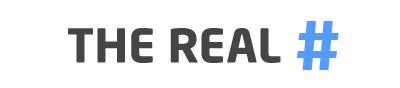
<style>
.page{position:relative;width:400px;height:88px;background:#ffffff}
.page>*{position:absolute;margin:0}
.t1{font:46px "NeoSans-Bold";color:#454545;text-transform:uppercase}
.t2{font:65.9px "NeoSans-Bold";color:#539bff;text-transform:uppercase}
</style>
<div class="page">
<p class="t1" style="left:68px;top:28px;width:213px;height:35px">the real</p>
<p class="t2" style="left:296px;top:21px;width:43px;height:49px">#</p>
</div>
